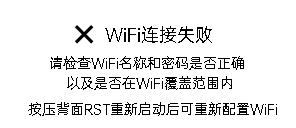
<style>
.page{position:relative;width:296px;height:128px;background:#ffffff}
.page>*{position:absolute;margin:0}
.t1{font:18px "OPPOSans-R";color:#000000}
.t2{font:14px "OPPOSans-R";color:#000000}
</style>
<div class="page">
<p class="t1" style="left:105px;top:26px;width:107px;height:17px">WiFi连接失败</p>
<p class="t2" style="left:50px;top:56px;width:194px;height:14px">请检查WiFi名称和密码是否正确</p>
<p class="t2" style="left:67px;top:76px;width:165px;height:14px">以及是否在WiFi覆盖范围内</p>
<p class="t2" style="left:28px;top:102px;width:249px;height:14px">按压背面RST重新启动后可重新配置WiFi</p>
</div>
